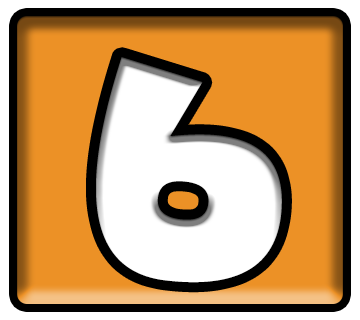
<style>
.page{position:relative;width:360px;height:320px;background:#ec9126}
.page>*{position:absolute;margin:0}
.t1{font:325.5px "Funhouse";color:#ffffff;scale:0.91 1}
</style>
<div class="page">
<p class="t1" style="left:96px;top:57px;width:186px;height:226px;rotate:6deg">6</p>
</div>
